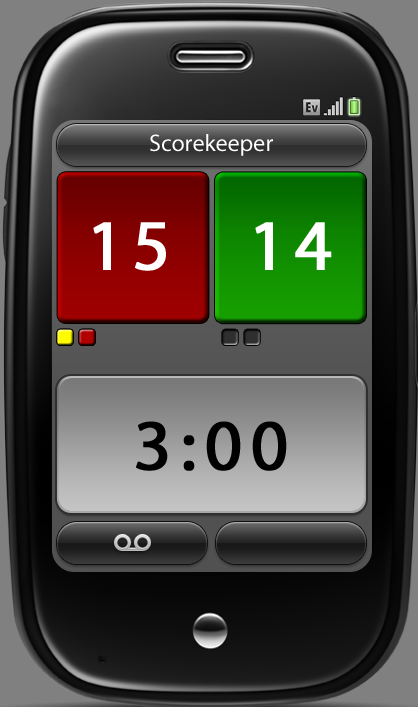
<style>
.page{position:relative;width:418px;height:707px}
.page>*{position:absolute;margin:0}
.t1{font:24px "MyriadPro-Regular";color:#ffffff}
.t2{font:72px "MyriadPro-Regular";letter-spacing:0.1em;color:#ffffff;font-weight:bold}
.t3{font:72px "MyriadPro-Regular";letter-spacing:0.1em;color:#010101;font-weight:bold}
</style>
<div class="page">
<p class="t1" style="left:150px;top:134px;width:123px;height:22px">Scorekeeper</p>
<p class="t2" style="left:93px;top:222px;width:73px;height:49px">15</p>
<p class="t2" style="left:255px;top:222px;width:77px;height:48px">14</p>
<p class="t3" style="left:136px;top:421px;width:151px;height:50px">3:00</p>
</div>
